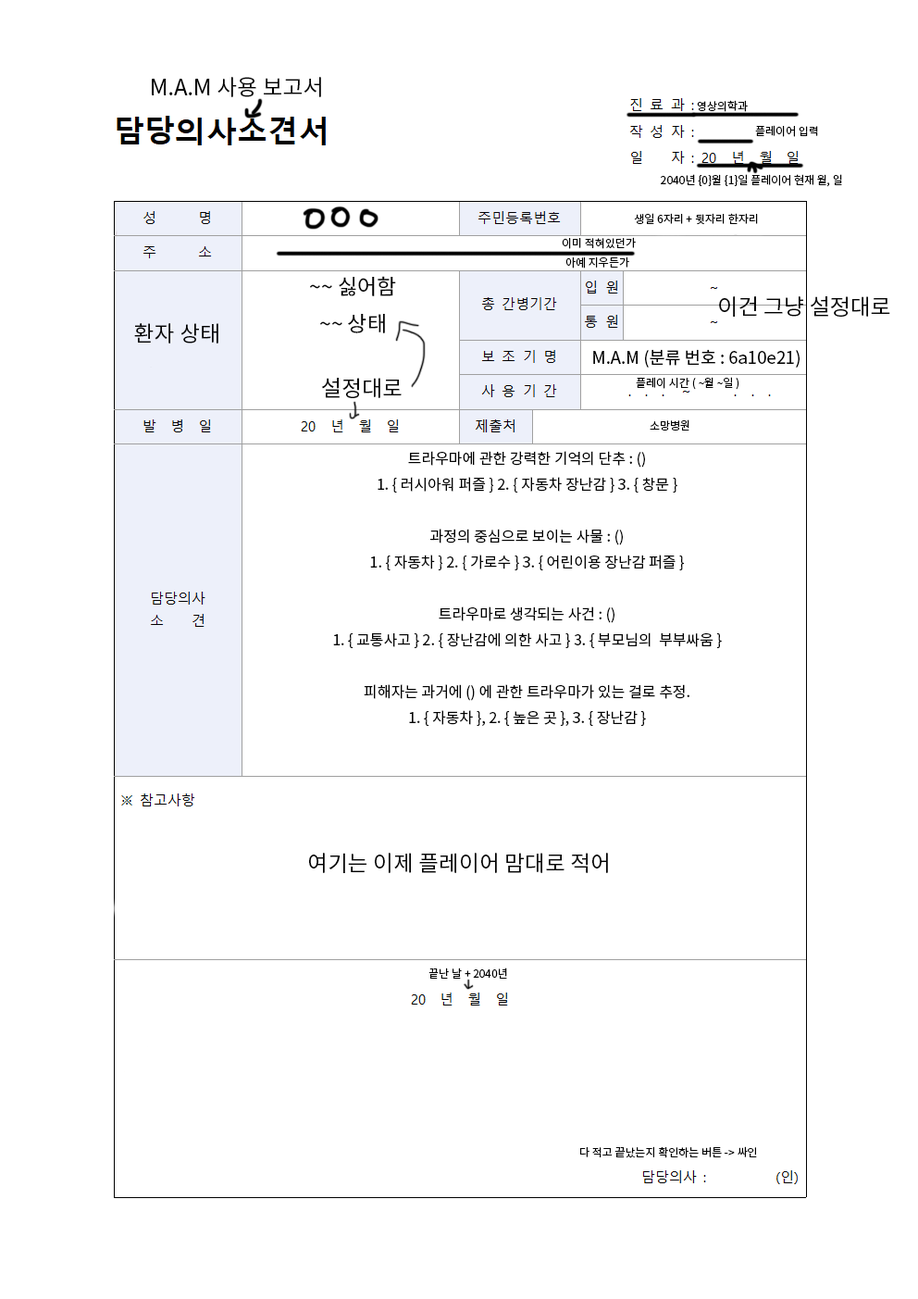
<style>
.page{position:relative;width:918px;height:1299px;background:#ffffff}
.page>*{position:absolute;margin:0}
.t1{font:22.2px "NotoSansCJKkr-Regular";color:#000000}
.t2{font:11.1px "NotoSansCJKkr-Regular";color:#000000}
.t3{font:21.3px "NotoSansCJKkr-Regular";color:#000000}
.t4{font:17.1px "NotoSansCJKkr-Regular";color:#000000}
.t5{font:14.8px "NotoSansCJKkr-Regular";color:#000000}
.t6{font:22px "NotoSansCJKkr-Regular";color:#000000}
</style>
<div class="page">
<p class="t1" style="left:152px;top:77px;width:169px;height:20px">M.A.M 사용 보고서</p>
<p class="t2" style="left:697px;top:100px;width:51px;height:12px">영상의학과</p>
<p class="t2" style="left:755px;top:125px;width:63px;height:12px">플레이어 입력</p>
<p class="t2" style="left:661px;top:174px;width:181px;height:13px">2040년 {0}월 {1}일 플레이어 현재 월, 일</p>
<p class="t2" style="left:634px;top:213px;width:124px;height:12px">생일 6자리 + 뒷자리 한자리</p>
<p class="t2" style="left:562px;top:237px;width:74px;height:31px;text-align:center">이미 적혀있던가<br>아예 지우든가</p>
<p class="t3" style="left:310px;top:276px;width:86px;height:57px;text-align:center">~~ 싫어함<br>~~ 상태<br>설정대로적으셈</p>
<p class="t1" style="left:719px;top:296px;width:171px;height:21px">이건 그냥 설정대로</p>
<p class="t1" style="left:134px;top:323px;width:84px;height:20px">환자 상태</p>
<p class="t4" style="left:593px;top:349px;width:207px;height:18px">M.A.M (분류 번호 : 6a10e21)</p>
<p class="t1" style="left:321px;top:378px;width:81px;height:20px">설정대로</p>
<p class="t2" style="left:636px;top:377px;width:104px;height:13px">플레이 시간 ( ~월 ~일 )</p>
<p class="t2" style="left:650px;top:419px;width:40px;height:11px">소망병원</p>
<p class="t5" style="left:333px;top:451px;width:389px;height:275px;text-align:justify">트라우마에 관한 강력한 기억의 단추 : ()<br>1. { 러시아워 퍼즐 } 2. { 자동차 장난감 } 3. { 창문 }<br><br>과정의 중심으로 보이는 사물 : ()<br>1. { 자동차 } 2. { 가로수 } 3. { 어린이용 장난감 퍼즐 }<br><br>트라우마로 생각되는 사건 : ()<br>1. { 교통사고 } 2. { 장난감에 의한 사고 } 3. { 부모님의  부부싸움 }<br><br>피해자는 과거에 () 에 관한 트라우마가 있는 걸로 추정.<br>1. { 자동차 }, 2. { 높은 곳 }, 3. { 장난감 }</p>
<p class="t6" style="left:309px;top:852px;width:299px;height:21px">여기는 이제 플레이어 맘대로 적어</p>
<p class="t2" style="left:429px;top:967px;width:78px;height:11px">끝난 날 + 2040년</p>
<p class="t2" style="left:580px;top:1146px;width:177px;height:12px">다 적고 끝났는지 확인하는 버튼 -&gt; 싸인</p>
</div>
